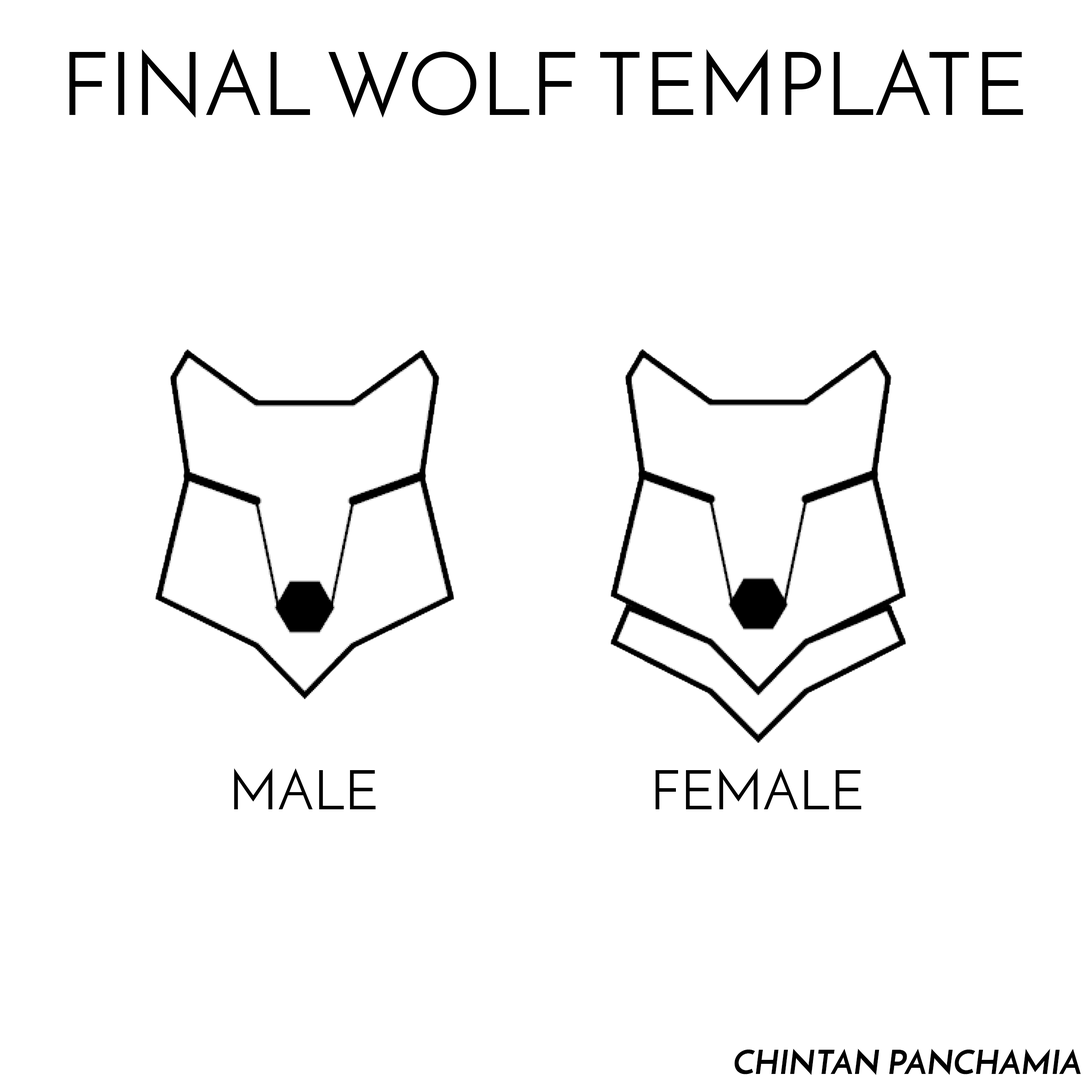
<style>
.page{position:relative;width:1092px;height:1092px;background:#ffffff}
.page>*{position:absolute;margin:0}
.t1{font:88.1px "JosefinSans";color:#000000}
.t2{font:55px "JosefinSans";color:#000000}
.t3{font:33px "JosefinSans-BoldItalic";color:#000000}
</style>
<div class="page">
<p class="t1" style="left:69px;top:48px;width:954px;height:70px">FINAL WOLF TEMPLATE</p>
<p class="t2" style="left:234px;top:768px;width:142px;height:41px">MALE</p>
<p class="t2" style="left:655px;top:768px;width:206px;height:41px">FEMALE</p>
<p class="t3" style="left:734px;top:1048px;width:347px;height:27px">CHINTAN PANCHAMIA</p>
</div>
